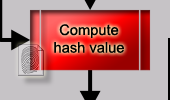
<style>
.page{position:relative;width:170px;height:100px;background:#c6c3c6}
.page>*{position:absolute;margin:0}
.t1{font:14.7px "ArialMT";color:#000000}
</style>
<div class="page">
<p class="t1" style="left:54px;top:24px;width:70px;height:29px;text-align:center">Compute<br>hash value</p>
</div>
